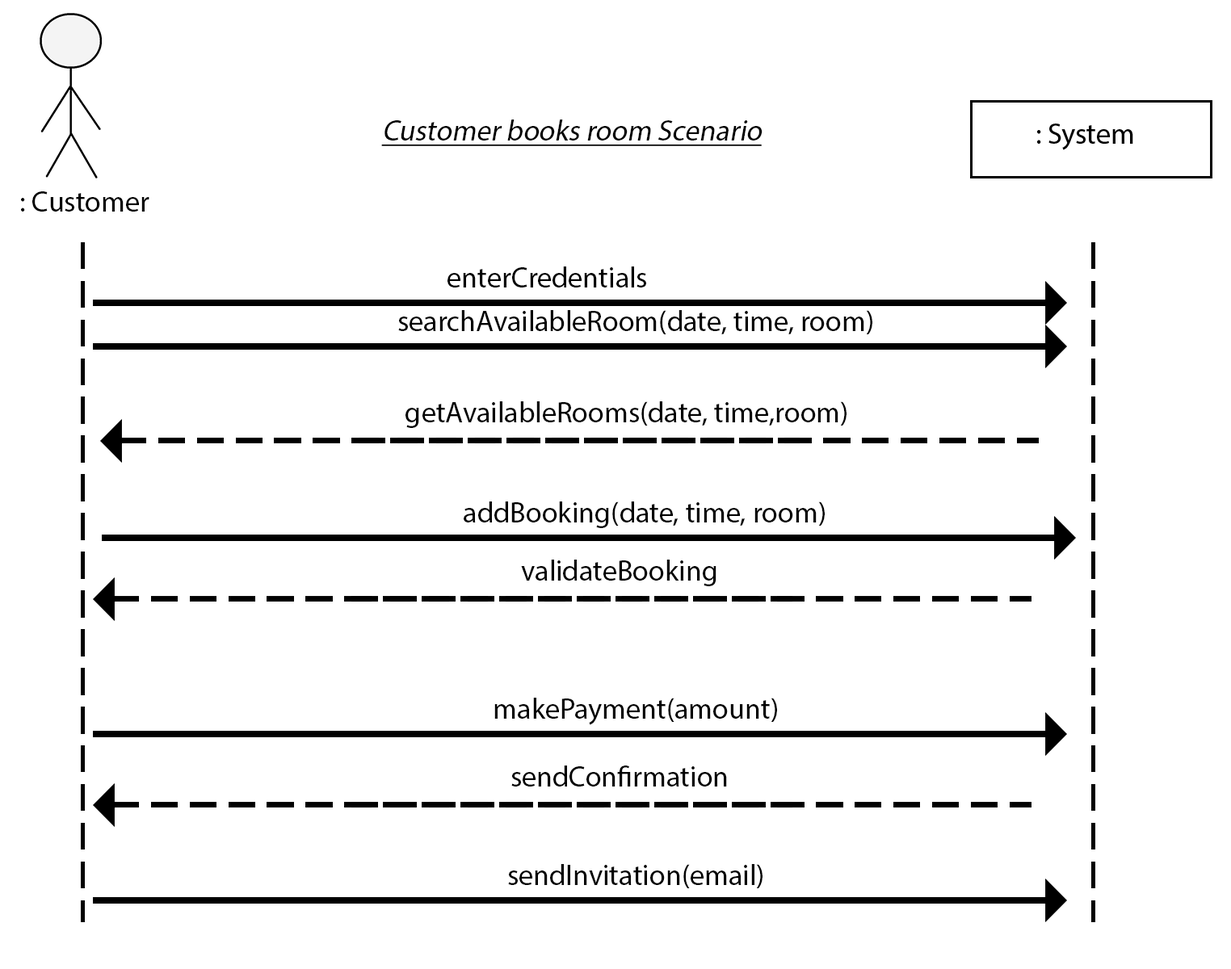
<style>
.page{position:relative;width:1231px;height:969px;background:#ffffff}
.page>*{position:absolute;margin:0}
.t1{font:29.1px "MyriadPro-Regular";color:#000000;font-style:italic;text-decoration:underline}
.t2{font:29.1px "MyriadPro-Regular";color:#000000}
</style>
<div class="page">
<p class="t1" style="left:381px;top:120px;width:381px;height:26px">Customer books room Scenario</p>
<p class="t2" style="left:21px;top:191px;width:128px;height:21px">: Customer</p>
<p class="t2" style="left:447px;top:266px;width:199px;height:21px">enterCredentials</p>
<p class="t2" style="left:398px;top:310px;width:474px;height:24px">searchAvailableRoom(date, time, room)</p>
<p class="t2" style="left:405px;top:401px;width:441px;height:27px">getAvailableRooms(date, time,room)</p>
<p class="t2" style="left:463px;top:501px;width:361px;height:27px">addBooking(date, time, room)</p>
<p class="t2" style="left:521px;top:560px;width:195px;height:26px">validateBooking</p>
<p class="t2" style="left:494px;top:698px;width:283px;height:27px">makePayment(amount)</p>
<p class="t2" style="left:511px;top:765px;width:216px;height:21px">sendConfirmation</p>
<p class="t2" style="left:508px;top:864px;width:254px;height:24px">sendInvitation(email)</p>
</div>
